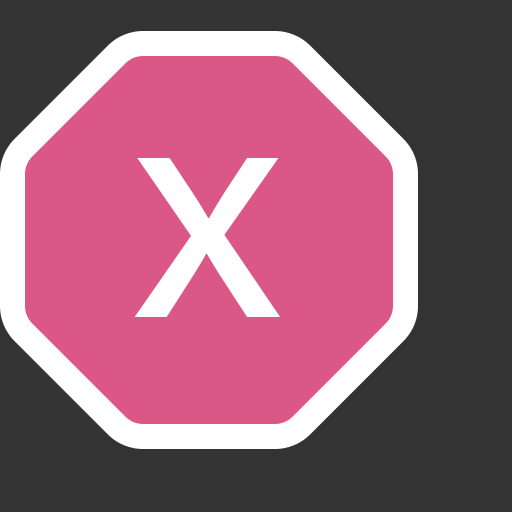
<style>
.page{position:relative;width:512px;height:512px;background:#333333}
.page>*{position:absolute;margin:0}
.t1{font:328px "MyriadPro-Regular";color:#ffffff}
</style>
<div class="page">
<p class="t1" style="left:134px;top:158px;width:146px;height:159px">x</p>
</div>
